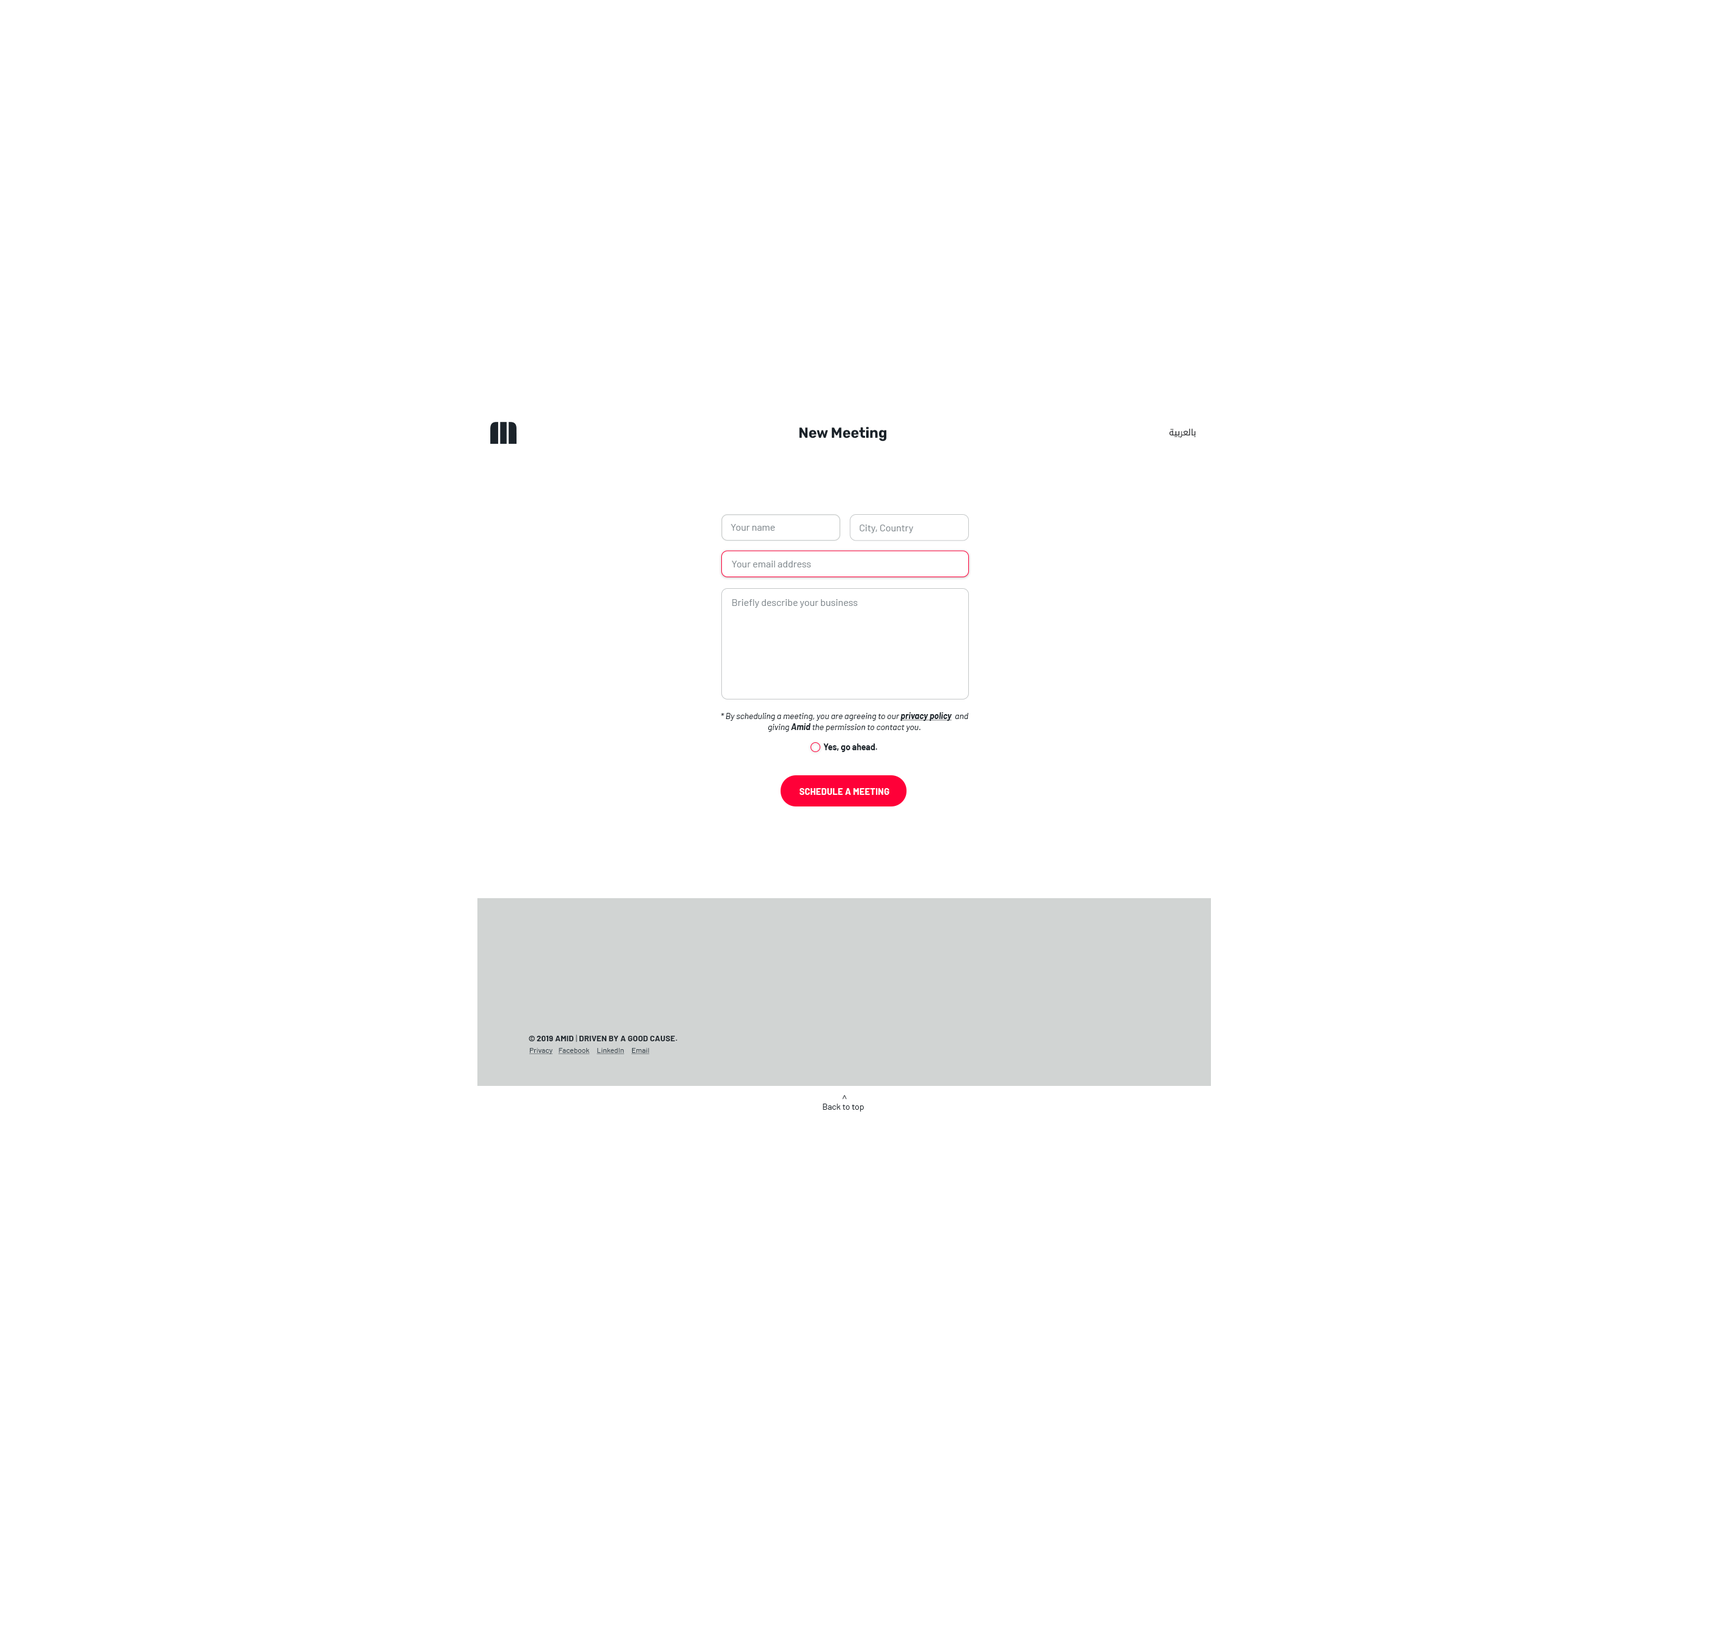
<style>
.page{position:relative;width:1714px;height:1627px;background:#ffffff}
.page>*{position:absolute;margin:0}
.t1{font:14.7px "Rubik-Bold";color:#1b232a;scale:0.95 1}
.t2{font:8.6px "DroidArabicKufi";color:#202124}
.t3{font:9.8px "Barlow-Regular";color:#828a8f}
.t4{font:8.6px/11px "Barlow-Italic";color:#1b232a}
.t5{font:8.6px/11px "Barlow-BoldItalic";color:#1b232a;text-decoration:underline}
.t6{font:8.6px/11px "Barlow-BoldItalic";color:#1b232a}
.t7{font:8.6px "Barlow-Bold";color:#1b232a}
.t8{font:9.2px "Barlow-Bold";letter-spacing:0.025em;color:#ffffff;text-transform:uppercase;scale:0.95 1}
.t9{font:7.9px "Barlow-Bold";letter-spacing:0.025em;color:#1b232a;text-transform:uppercase}
.t10{font:7.9px "Barlow-Bold";color:#1b232a}
.t11{font:7.9px "Barlow-Bold";letter-spacing:0.025em;color:#1b232a}
.t12{font:7.9px "Barlow-Regular";letter-spacing:0.025em;color:#1b232a}
.t13{font:7.3px "Barlow-Regular";color:#36424a;text-decoration:underline}
.t14{font:9px "Barlow-Regular"}
.t15{font:8.6px "Barlow-Regular";color:#1b232a}
</style>
<div class="page">
<p class="t1" style="left:799px;top:427px;width:87px;height:14px">New Meeting</p>
<p class="t2" style="left:1170px;top:429px;width:26px;height:9px">ﺔﻴﺑﺮﻌﻟﺎﺑ</p>
<p class="t3" style="left:731px;top:524px;width:44px;height:7px">Your name</p>
<p class="t3" style="left:860px;top:525px;width:53px;height:8px">City, Country</p>
<p class="t3" style="left:732px;top:561px;width:79px;height:6px">Your email address</p>
<p class="t3" style="left:732px;top:599px;width:126px;height:9px">Briefly describe your business</p>
<p class="t4" style="left:721px;top:712px;width:248px;height:20px;text-align:center">* By scheduling a meeting, you are agreeing to our <span class="t5">privacy policy </span> and giving<span class="t6"> Amid</span> the permission to contact you.</p>
<p class="t7" style="left:824px;top:743px;width:53px;height:9px">Yes, go ahead.</p>
<p class="t8" style="left:800px;top:788px;width:90px;height:7px">SCHEDULE A MEETING</p>
<p class="t9" style="left:529px;top:1034px;width:148px;height:8px"><span class="t10">© </span><span class="t11">2019 </span>Amid <span class="t12">|</span> Driven by a good cause.</p>
<p class="t13" style="left:529px;top:1048px;width:121px;height:6px">Privacy    Facebook     LinkedIn     Email</p>
<p class="t14" style="left:842px;top:1095px;width:5px;height:4px;rotate:-90deg">&gt;</p>
<p class="t15" style="left:823px;top:1104px;width:41px;height:7px">Back to top</p>
</div>
